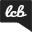
<style>
.page{position:relative;width:32px;height:32px;background:#222222}
.page>*{position:absolute;margin:0}
.t1{font:12.8px "Pacifico";color:#ffffff;scale:1.41 1}
</style>
<div class="page">
<p class="t1" style="left:5px;top:5px;width:22px;height:12px">lcb</p>
</div>
